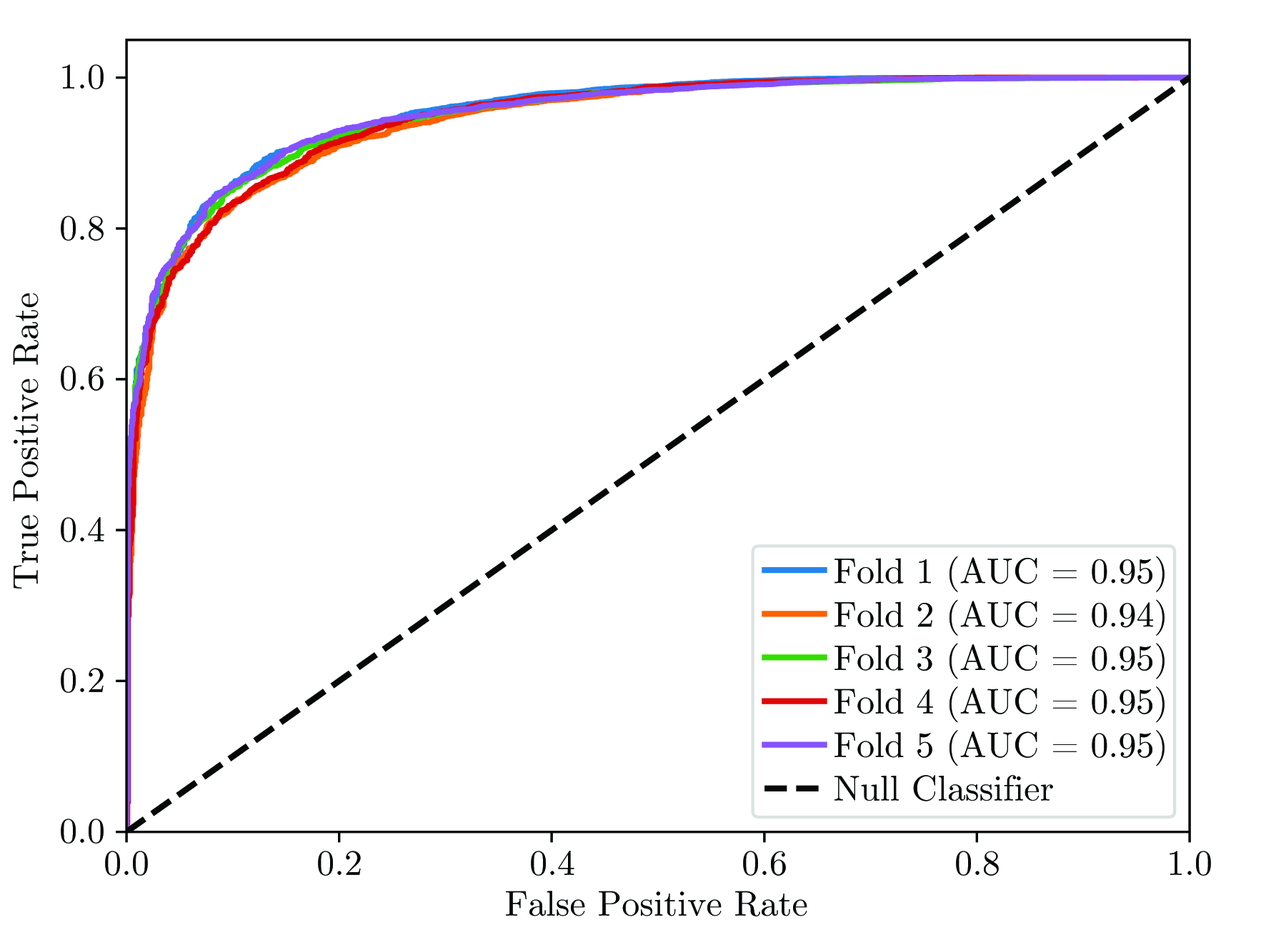
<style>
.page{position:relative;width:1261px;height:945px;background:#ffffff}
.page>*{position:absolute;margin:0}
.t1{font:35.7px "CMUSerif-Roman";color:#060808}
.t2{font:35.7px/43.5px "CMUSerif-Roman";color:#060808}
</style>
<div class="page">
<p class="t1" style="left:62px;top:64px;width:42px;height:25px">1.0</p>
<p class="t1" style="left:61px;top:216px;width:43px;height:25px">0.8</p>
<p class="t1" style="left:13px;top:293px;width:26px;height:296px;rotate:-90deg">True Positive Rate</p>
<p class="t1" style="left:61px;top:366px;width:43px;height:25px">0.6</p>
<p class="t1" style="left:61px;top:517px;width:43px;height:25px">0.4</p>
<p class="t2" style="left:835px;top:556px;width:330px;height:246px">Fold 1 (AUC = 0.95)<br>Fold 2 (AUC = 0.94)<br>Fold 3 (AUC = 0.95)<br>Fold 4 (AUC = 0.95)<br>Fold 5 (AUC = 0.95)<br>Null Classifier</p>
<p class="t1" style="left:61px;top:668px;width:43px;height:25px">0.2</p>
<p class="t1" style="left:61px;top:819px;width:43px;height:25px">0.0</p>
<p class="t1" style="left:105px;top:851px;width:43px;height:25px">0.0</p>
<p class="t1" style="left:318px;top:851px;width:43px;height:25px">0.2</p>
<p class="t1" style="left:531px;top:851px;width:44px;height:25px">0.4</p>
<p class="t1" style="left:743px;top:851px;width:43px;height:25px">0.6</p>
<p class="t1" style="left:956px;top:851px;width:43px;height:25px">0.8</p>
<p class="t1" style="left:1170px;top:851px;width:41px;height:25px">1.0</p>
<p class="t1" style="left:506px;top:891px;width:302px;height:26px">False Positive Rate</p>
</div>
